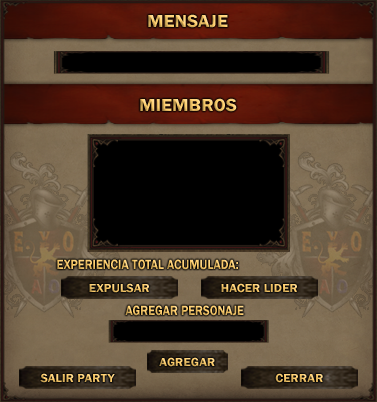
<style>
.page{position:relative;width:377px;height:402px}
.page>*{position:absolute;margin:0}
.t1{font:18px "FranklinGothic-Demi";scale:1.07 1}
.t2{font:14px "FranklinGothic-Demi";scale:0.86 1}
.t3{font:12px "FranklinGothic-Demi";scale:1.07 1}
</style>
<div class="page">
<p class="t1" style="left:148px;top:14px;width:80px;height:14px">MENSAJE</p>
<p class="t1" style="left:140px;top:98px;width:97px;height:14px">MIEMBROSOS</p>
<p class="t2" style="left:57px;top:259px;width:181px;height:11px">EXPERIENCIA TOTAL ACUMULADA:</p>
<p class="t3" style="left:89px;top:283px;width:60px;height:10px">EXPULSAR</p>
<p class="t3" style="left:221px;top:283px;width:76px;height:10px">HACER LIDER</p>
<p class="t2" style="left:125px;top:305px;width:119px;height:11px">AGREGAR PERSONAJE</p>
<p class="t3" style="left:159px;top:357px;width:56px;height:10px">AGREGAR</p>
<p class="t3" style="left:40px;top:373px;width:75px;height:10px">SALIR PARTY</p>
<p class="t3" style="left:275px;top:373px;width:48px;height:10px">CERRAR</p>
</div>
